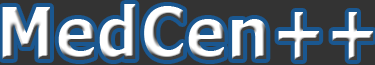
<style>
.page{position:relative;width:375px;height:65px;background:#333333}
.page>*{position:absolute;margin:0}
.t1{font:72px "Verdana-Bold";scale:0.87 1}
</style>
<div class="page">
<p class="t1" style="left:2px;top:4px;width:372px;height:56px">MedCen++</p>
</div>
